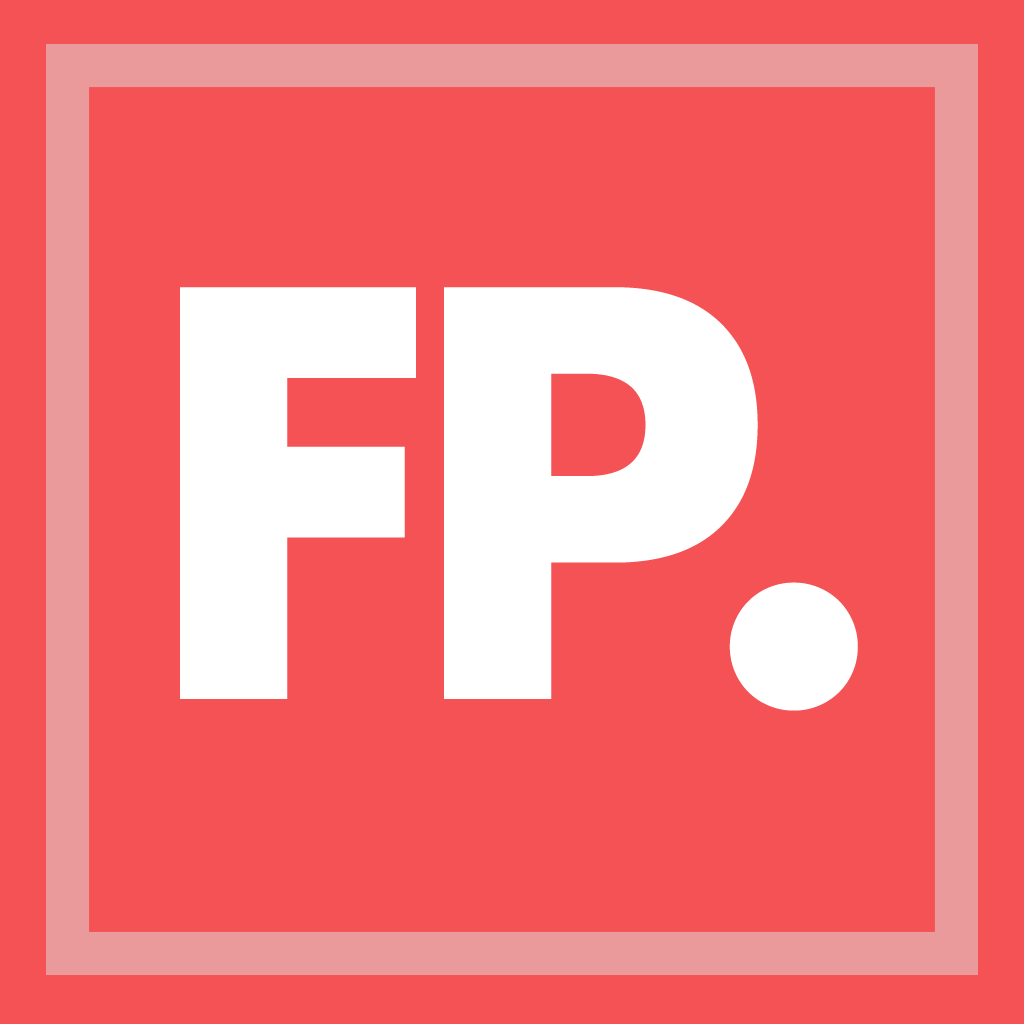
<style>
.page{position:relative;width:1024px;height:1024px;background:#f45255}
.page>*{position:absolute;margin:0}
.t1{font:546px "Futura-Bold";letter-spacing:-0.065em;color:#ffffff}
</style>
<div class="page">
<p class="t1" style="left:180px;top:287px;width:678px;height:424px">FP.</p>
</div>
